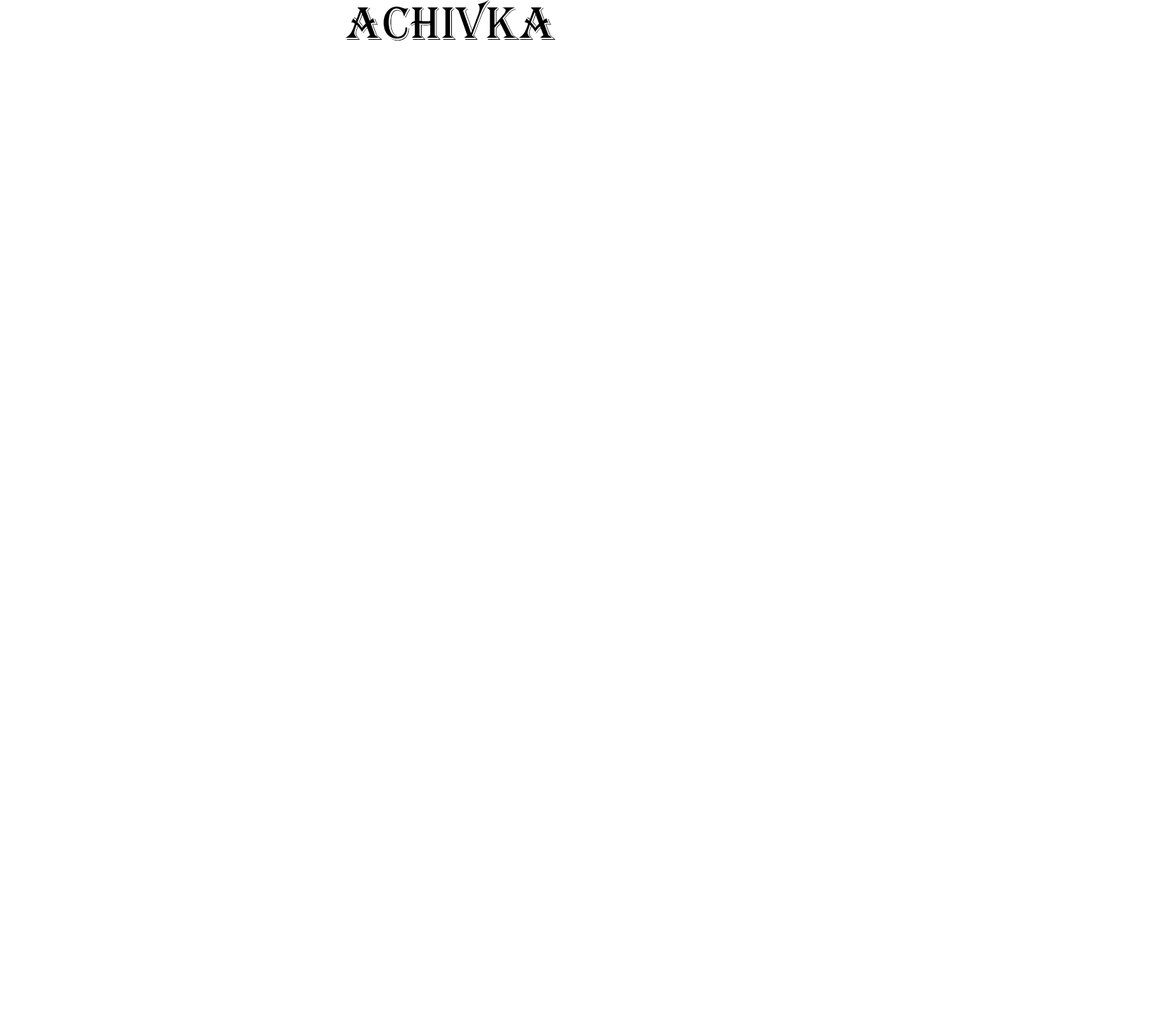
<style>
.page{position:relative;width:1152px;height:1036px;background:#ffffff}
.page>*{position:absolute;margin:0}
.t1{font:48.5px "Algerian";color:#000000}
</style>
<div class="page">
<p class="t1" style="left:345px;top:0px;width:211px;height:41px">Achivka</p>
</div>
